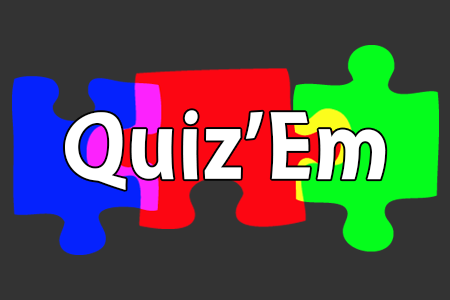
<style>
.page{position:relative;width:450px;height:300px;background:#333333}
.page>*{position:absolute;margin:0}
.t1{font:94px "MyriadPro-Bold";color:#ffffff;scale:0.84 1}
</style>
<div class="page">
<p class="t1" style="left:65px;top:110px;width:321px;height:80px">Quiz’Em</p>
</div>
